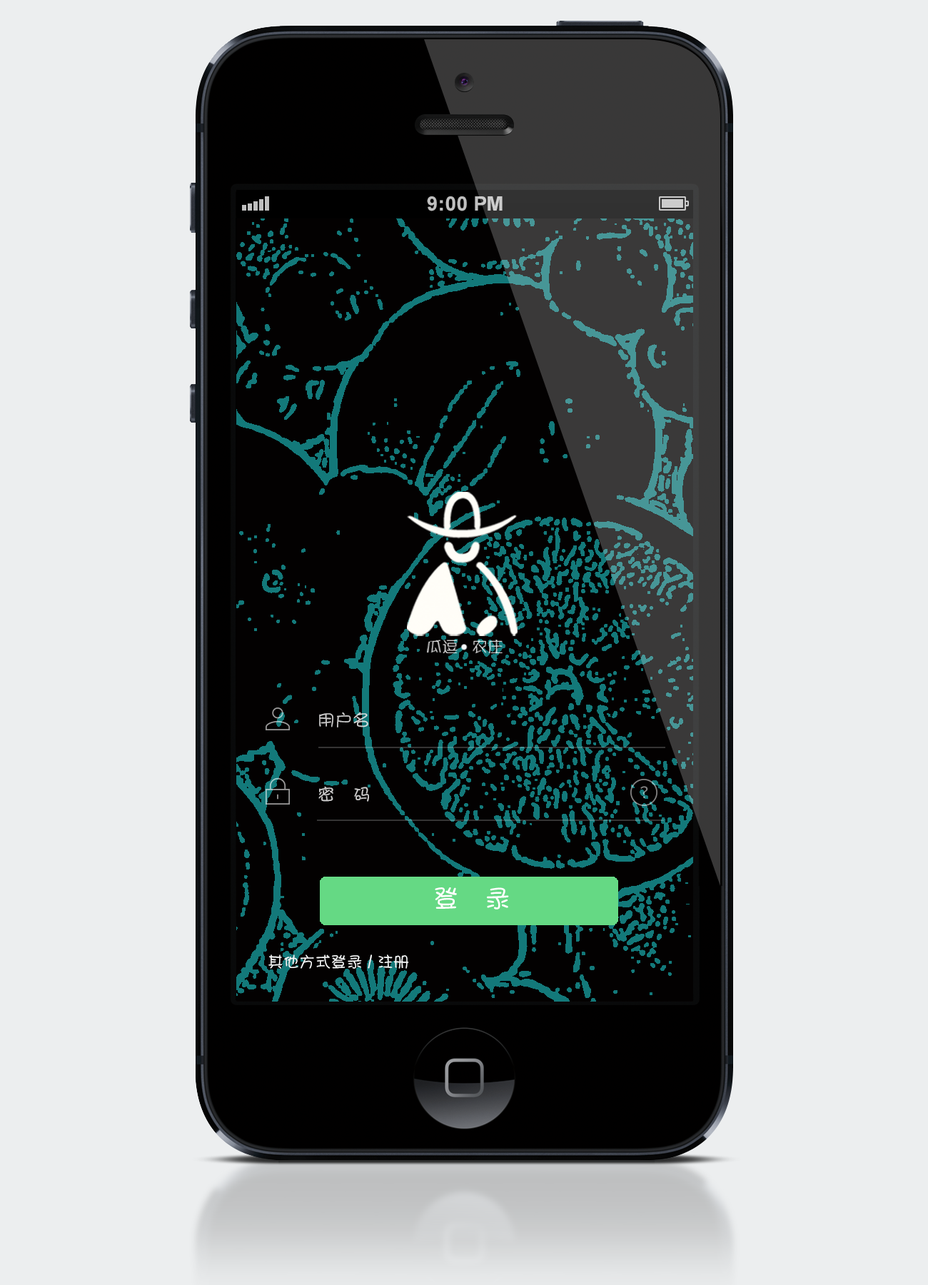
<style>
.page{position:relative;width:928px;height:1285px;background:#eceeef}
.page>*{position:absolute;margin:0}
.t1{font:17.1px "DFPShaoNvW5";letter-spacing:0.02em;color:#cccbcb}
.t2{font:25.7px "DFPShaoNvW5";color:#ffffff}
.t3{font:15.8px "DFPShaoNvW5";color:#f6f8f8}
</style>
<div class="page">
<p class="t1" style="left:319px;top:712px;width:49px;height:15px">用户名</p>
<p class="t1" style="left:318px;top:786px;width:51px;height:16px">密   码</p>
<p class="t2" style="left:435px;top:887px;width:74px;height:22px">登   录</p>
<p class="t3" style="left:268px;top:954px;width:141px;height:15px">其他方式登录 / 注册</p>
</div>
